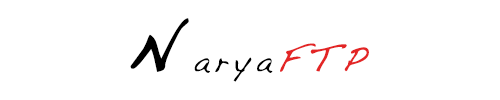
<style>
.page{position:relative;width:500px;height:100px;background:#ffffff}
.page>*{position:absolute;margin:0}
.t1{font:30px "Handwriting-Dakota";letter-spacing:0.2em;color:#000000;font-weight:bold}
.t2{font:72px "Handwriting-Dakota";letter-spacing:0.2em;color:#000000;font-weight:bold}
.t3{font:36px "Handwriting-Dakota";letter-spacing:0.2em;color:#e32525;font-weight:bold}
</style>
<div class="page">
<p class="t1" style="left:130px;top:18px;width:239px;height:64px"><span class="t2">N</span>arya<span class="t3">FTP</span></p>
</div>
